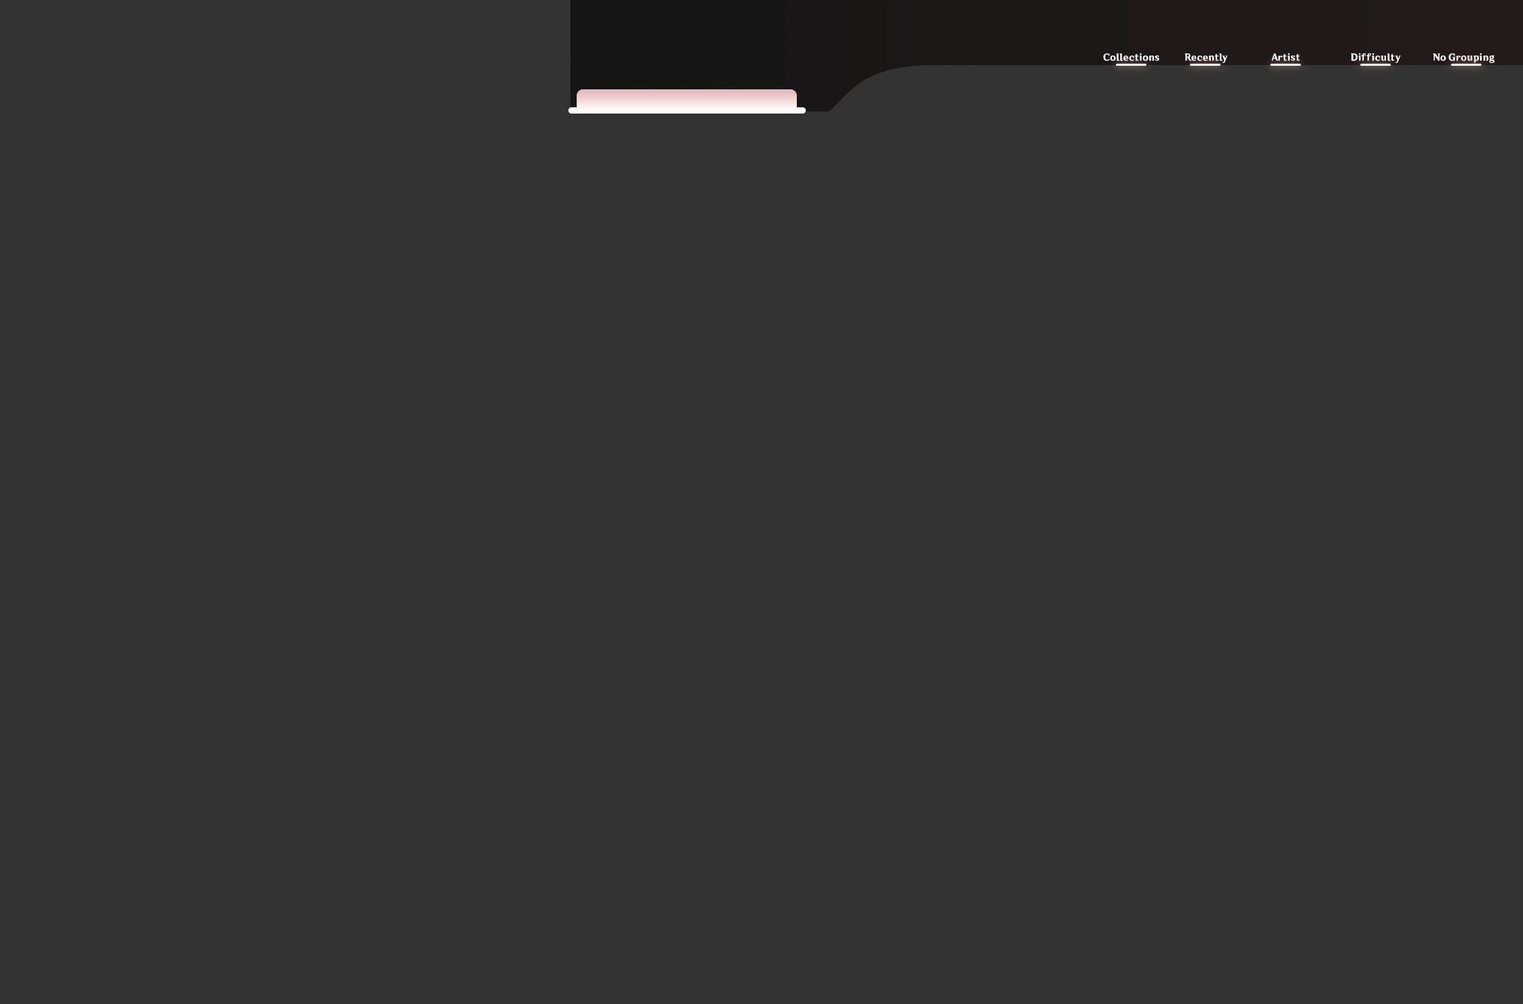
<style>
.page{position:relative;width:1523px;height:1004px;background:#333333}
.page>*{position:absolute;margin:0}
.t1{font:9px "Default_SC-85W";color:#ffffff}
.t2{font:9px "Default_SC-85W";color:#fefefe}
</style>
<div class="page">
<p class="t1" style="left:1104px;top:53px;width:56px;height:8px">Collections</p>
<p class="t1" style="left:1185px;top:53px;width:43px;height:10px">Recently</p>
<p class="t1" style="left:1272px;top:53px;width:28px;height:8px">Artist</p>
<p class="t2" style="left:1351px;top:53px;width:50px;height:10px">Difficulty</p>
<p class="t1" style="left:1433px;top:53px;width:62px;height:10px">No Grouping</p>
</div>
